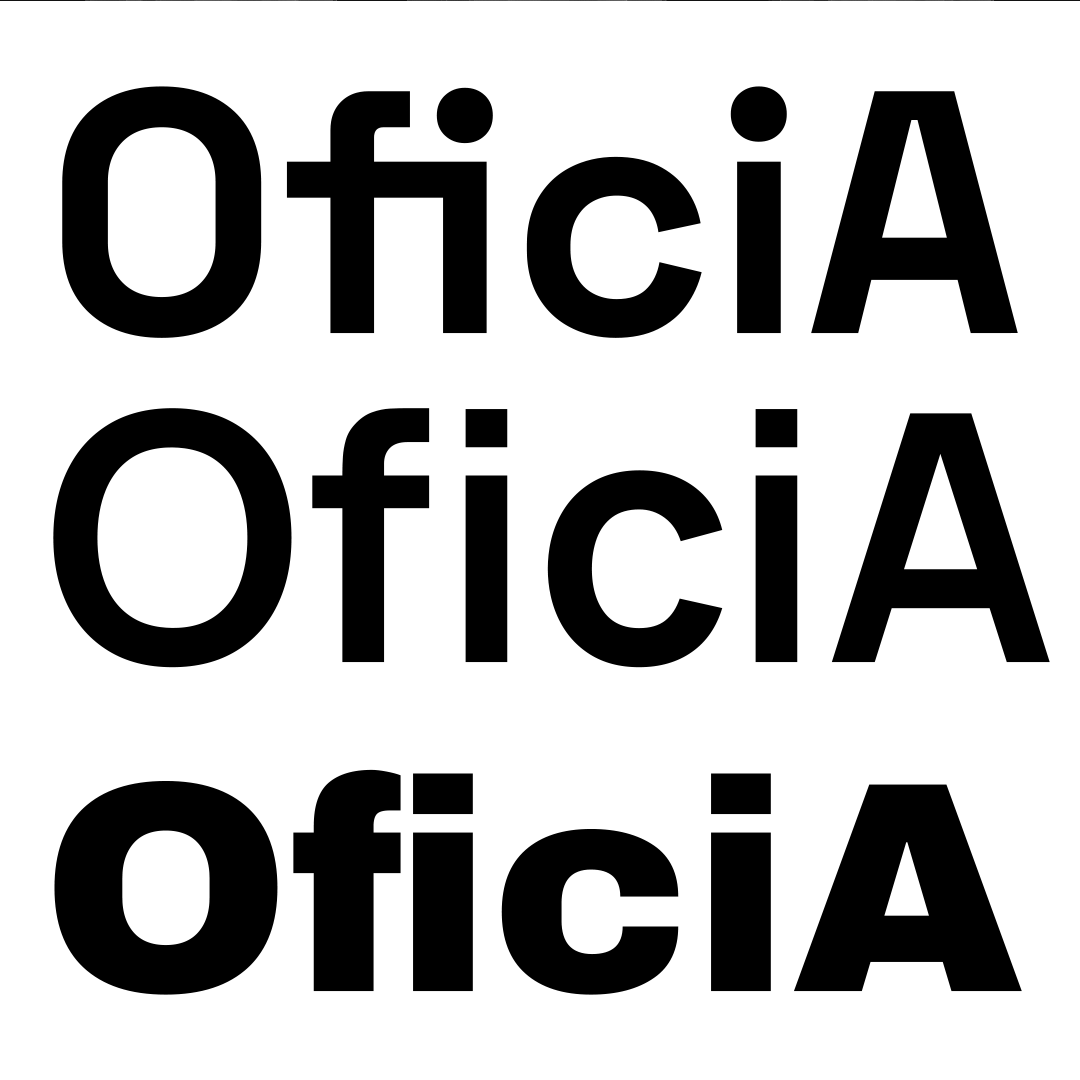
<style>
.page{position:relative;width:1080px;height:1080px;background:#ffffff}
.page>*{position:absolute;margin:0}
.t1{font:345.3px "SpaceGrotesk-Bold";color:#000000}
.t2{font:345.3px "Manrope-Bold";color:#000000}
.t3{font:300px "ArchivoBlack-Regular";color:#000000}
</style>
<div class="page">
<p class="t1" style="left:62px;top:85px;width:956px;height:252px">OficiA</p>
<p class="t2" style="left:53px;top:407px;width:997px;height:260px">OficiA</p>
<p class="t3" style="left:54px;top:768px;width:968px;height:226px">OficiA</p>
</div>
